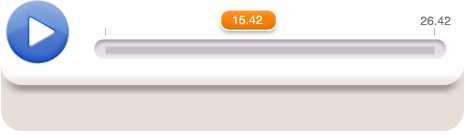
<style>
.page{position:relative;width:465px;height:135px;background:#ffffff}
.page>*{position:absolute;margin:0}
.t1{font:12px "Helvetica";color:#ffffff}
.t2{font:12px "Helvetica";color:#787878}
</style>
<div class="page">
<p class="t1" style="left:233px;top:15px;width:30px;height:10px">15.42</p>
<p class="t2" style="left:420px;top:16px;width:31px;height:10px">26.42</p>
</div>
